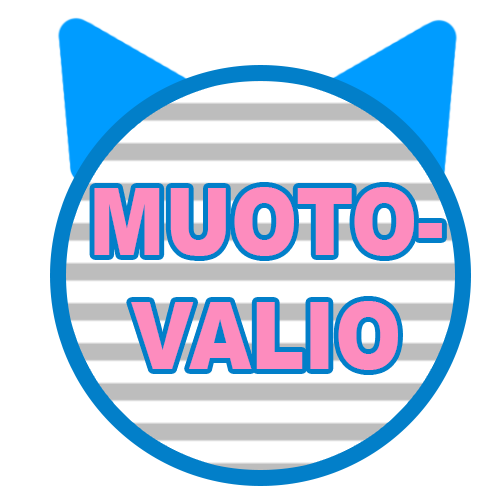
<style>
.page{position:relative;width:500px;height:500px;background:#ffffff}
.page>*{position:absolute;margin:0}
.t1{font:94.4px "Arial-Black";color:#fd8cbe;scale:0.85 1}
</style>
<div class="page">
<p class="t1" style="left:94px;top:187px;width:348px;height:183px;text-align:center">MUOTO-<br>VALIO</p>
</div>
